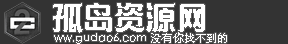
<style>
.page{position:relative;width:288px;height:44px;background:#333333}
.page>*{position:absolute;margin:0}
.t1{font:30.7px "MF-YuYiNoncommercial)-Regular";color:#ffffff}
.t2{font:10.7px "STHeitiSC-Light";color:#ffffff}
</style>
<div class="page">
<p class="t1" style="left:53px;top:3px;width:152px;height:30px">孤岛资源网</p>
<p class="t2" style="left:54px;top:32px;width:173px;height:12px">ww.gudao6.com 没有你找不到的</p>
</div>
